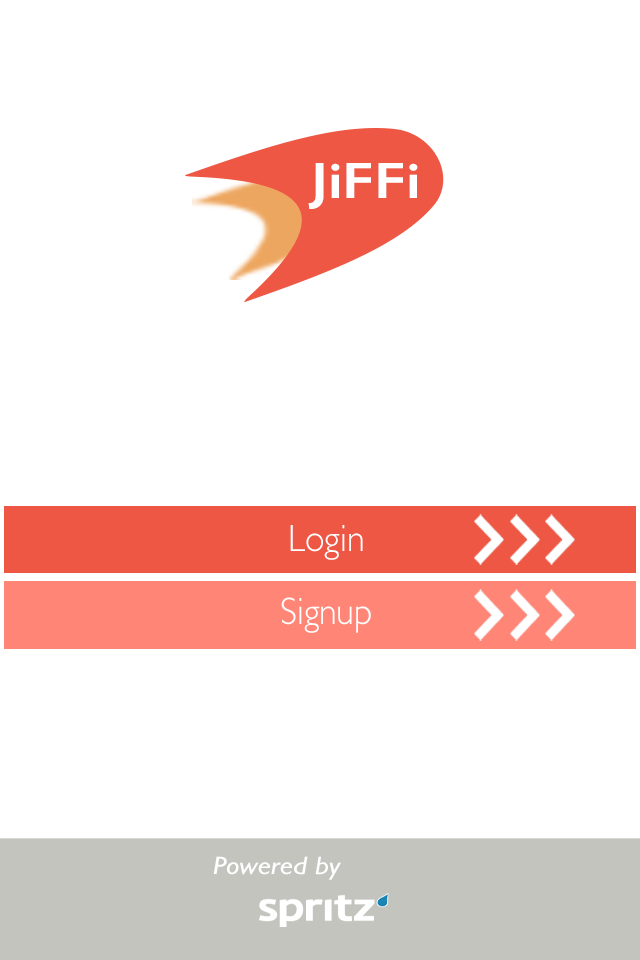
<style>
.page{position:relative;width:640px;height:960px;background:#ffffff}
.page>*{position:absolute;margin:0}
.t1{font:51.1px "GillSans-SemiBold";color:#fefefe;scale:1.16 1}
.t2{font:38px "GillSans-Light";color:#ffffff;scale:0.95 1}
.t3{font:38.4px/16px "GillSans-Light";color:#ffffff;scale:0.94 1}
.t4{font:25.4px "GillSans-Italic";color:#ffffff;scale:1.18 1}
</style>
<div class="page">
<p class="t1" style="left:308px;top:163px;width:110px;height:46px">JiFFi</p>
<p class="t2" style="left:290px;top:525px;width:73px;height:35px">Login</p>
<p class="t3" style="left:281px;top:597px;width:90px;height:36px">Signup<br><br>av</p>
<p class="t4" style="left:213px;top:856px;width:128px;height:24px">Powered by</p>
</div>
